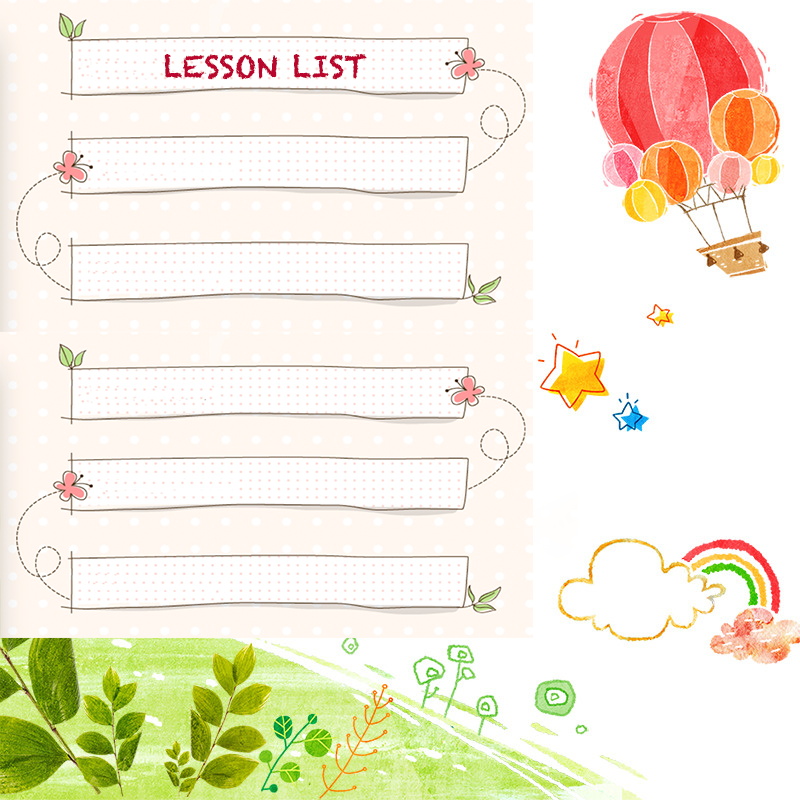
<style>
.page{position:relative;width:800px;height:800px;background:#ffffff}
.page>*{position:absolute;margin:0}
.t1{font:30px "Chalkduster";color:#ba062c;text-transform:uppercase}
</style>
<div class="page">
<p class="t1" style="left:164px;top:53px;width:203px;height:27px">Lesson List</p>
</div>
